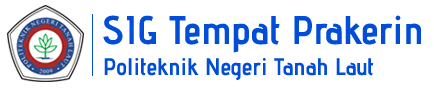
<style>
.page{position:relative;width:434px;height:90px;background:#ffffff}
.page>*{position:absolute;margin:0}
.t1{font:40px "AdventPro-Bold";color:#004dda}
.t2{font:24px "AdventPro-Bold";color:#004dda}
</style>
<div class="page">
<p class="t1" style="left:103px;top:15px;width:318px;height:38px">SIG Tempat Prakerin</p>
<p class="t2" style="left:104px;top:58px;width:270px;height:22px">Politeknik Negeri Tanah Laut</p>
</div>
